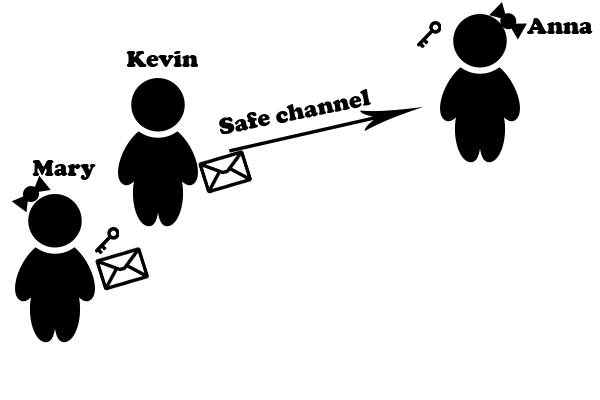
<style>
.page{position:relative;width:600px;height:400px;background:#ffffff}
.page>*{position:absolute;margin:0}
.t1{font:24px "CooperBlack";color:#000000}
</style>
<div class="page">
<p class="t1" style="left:527px;top:18px;width:66px;height:16px">Anna</p>
<p class="t1" style="left:126px;top:51px;width:72px;height:16px">Kevin</p>
<p class="t1" style="left:219px;top:89px;width:152px;height:45px;rotate:-12deg">Safe channel</p>
<p class="t1" style="left:32px;top:160px;width:64px;height:20px">Mary</p>
</div>
